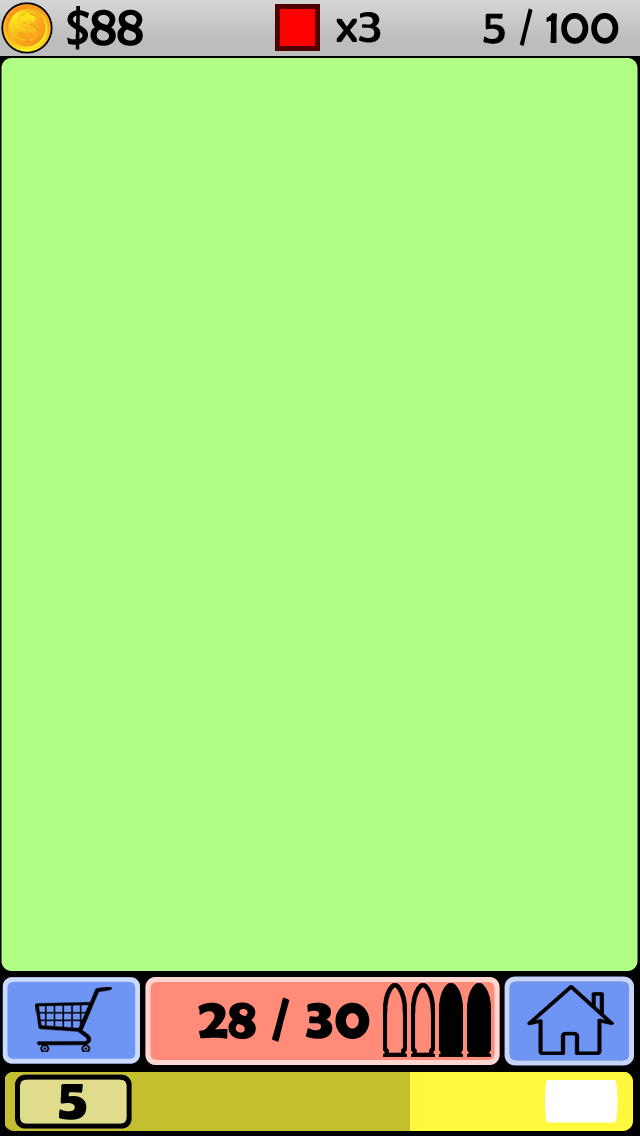
<style>
.page{position:relative;width:640px;height:1136px;background:#b0fe83}
.page>*{position:absolute;margin:0}
.t1{font:58.3px "BerlinSansFB-Reg";color:#000000}
.t2{font:50px "BerlinSansFB-Reg";color:#000000}
.t3{font:58.3px "BerlinSansFBDemi-Bold";color:#000000}
</style>
<div class="page">
<p class="t1" style="left:67px;top:6px;width:76px;height:44px">$88</p>
<p class="t2" style="left:336px;top:12px;width:45px;height:31px">x3</p>
<p class="t2" style="left:483px;top:8px;width:136px;height:38px">5 / 100</p>
<p class="t3" style="left:198px;top:997px;width:172px;height:45px">28 / 30</p>
<p class="t3" style="left:59px;top:1084px;width:28px;height:36px">5</p>
</div>
